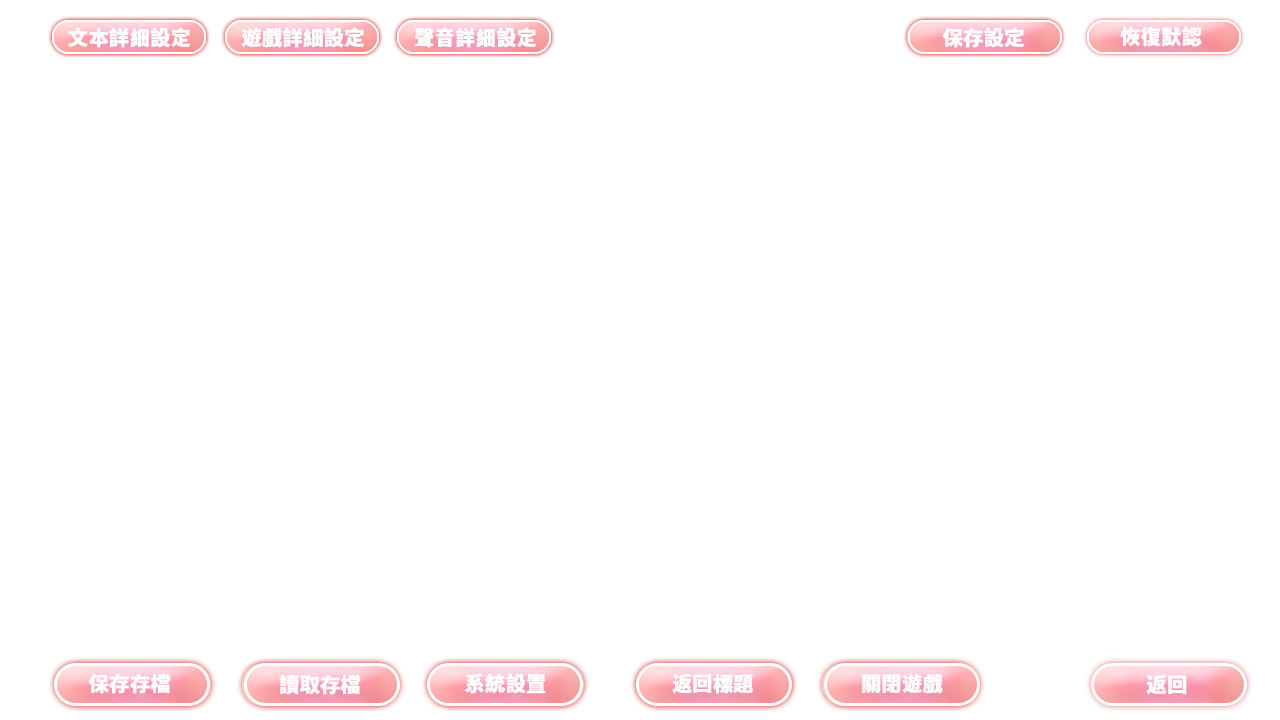
<style>
.page{position:relative;width:1280px;height:720px;background:#ffffff}
.page>*{position:absolute;margin:0}
.t1{font:20px "SourceHanSansCN-Heavy";color:#ffffff;font-weight:bold}
</style>
<div class="page">
<p class="t1" style="left:68px;top:27px;width:123px;height:21px">文本詳細設定</p>
<p class="t1" style="left:241px;top:27px;width:124px;height:21px">遊戲詳細設定</p>
<p class="t1" style="left:414px;top:27px;width:123px;height:21px">聲音詳細設定</p>
<p class="t1" style="left:942px;top:27px;width:83px;height:21px">保存設定</p>
<p class="t1" style="left:1120px;top:26px;width:82px;height:21px">恢復默認</p>
<p class="t1" style="left:88px;top:673px;width:83px;height:21px">保存存檔</p>
<p class="t1" style="left:279px;top:674px;width:82px;height:21px">讀取存檔</p>
<p class="t1" style="left:464px;top:673px;width:82px;height:21px">系統設置</p>
<p class="t1" style="left:672px;top:673px;width:81px;height:21px">返回標題</p>
<p class="t1" style="left:862px;top:673px;width:81px;height:21px">關閉遊戲</p>
<p class="t1" style="left:1146px;top:674px;width:41px;height:21px">返回</p>
</div>
